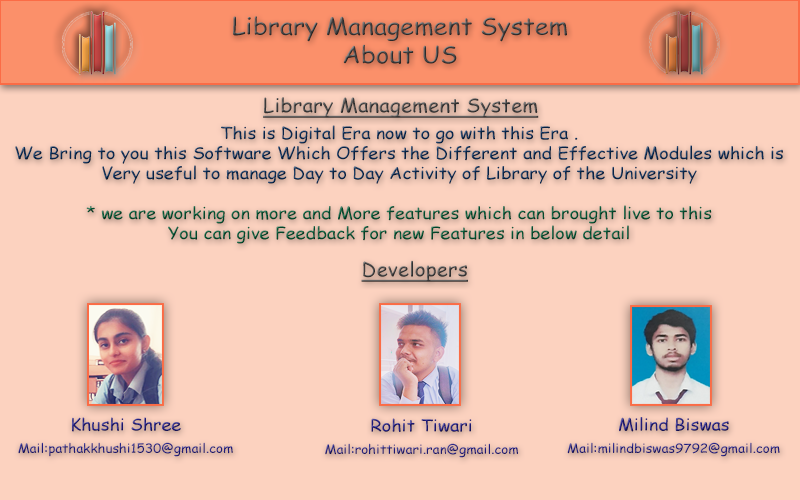
<style>
.page{position:relative;width:800px;height:500px;background:#fcd2bf}
.page>*{position:absolute;margin:0}
.t1{font:23.8px "ComicSansMS";color:#444343;scale:1.06 1}
.t2{font:19.4px "ComicSansMS";color:#444343;text-decoration:underline;scale:1.06 1}
.t3{font:16.7px "ComicSansMS";color:#092c56;scale:1.08 1}
.t4{font:16.7px "ComicSansMS";color:#045735;scale:1.08 1}
.t5{font:12.5px/22.2px "ComicSansMS";color:#231e82;scale:1.08 1}
.t6{font:16.7px "ComicSansMS";color:#231e82;scale:1.08 1}
</style>
<div class="page">
<p class="t1" style="left:233px;top:16px;width:334px;height:48px;text-align:center">Library Management System<br>About US</p>
<p class="t2" style="left:263px;top:97px;width:276px;height:21px">Library Management System</p>
<p class="t3" style="left:15px;top:125px;width:768px;height:119px;text-align:center">This is Digital Era now to go with this Era .<br>We Bring to you this Software Which Offers the Different and Effective Modules which is Very useful to manage Day to Day Activity of Library of the University<br><br><span class="t4">* we are working on more and More features which can brought live to this <br>You can give Feedback for new Features in below detail</span></p>
<p class="t2" style="left:361px;top:260px;width:107px;height:22px">Developers</p>
<p class="t5" style="left:18px;top:417px;width:215px;height:40px;text-align:center"><span class="t6">Khushi Shree<br></span>Mail:pathakkhushi1530@gmail.com</p>
<p class="t5" style="left:325px;top:418px;width:193px;height:40px;text-align:center"><span class="t6">Rohit Tiwari<br></span>Mail:rohittiwari.ran@gmail.com</p>
<p class="t5" style="left:567px;top:417px;width:213px;height:40px;text-align:center"><span class="t6">Milind Biswas<br></span>Mail:milindbiswas9792@gmail.com</p>
</div>
